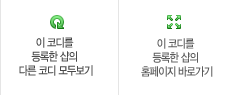
<style>
.page{position:relative;width:235px;height:95px;background:#ffffff}
.page>*{position:absolute;margin:0}
.t1{font:11.7px/14px "YDIYGO330";letter-spacing:-0.075em;color:#494949;scale:0.87 1}
.t2{font:11.7px/14px "YDIYGO330";letter-spacing:-0.075em;color:#5b5b5b;scale:0.87 1}
</style>
<div class="page">
<p class="t1" style="left:19px;top:37px;width:74px;height:39px;text-align:center">이 코디를 <br>등록한 샵의 <br>다른 코디 모두보기</p>
<p class="t2" style="left:141px;top:38px;width:72px;height:39px;text-align:center">이 코디를 <br>등록한 샵의 <br>홈페이지 바로가기</p>
</div>
